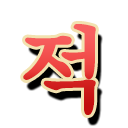
<style>
.page{position:relative;width:128px;height:128px;background:#ffffff}
.page>*{position:absolute;margin:0}
.t1{font:94px "YESMyoungjo-Regular";letter-spacing:0.12em;font-weight:bold}
</style>
<div class="page">
<p class="t1" style="left:23px;top:24px;width:73px;height:91px">적</p>
</div>
